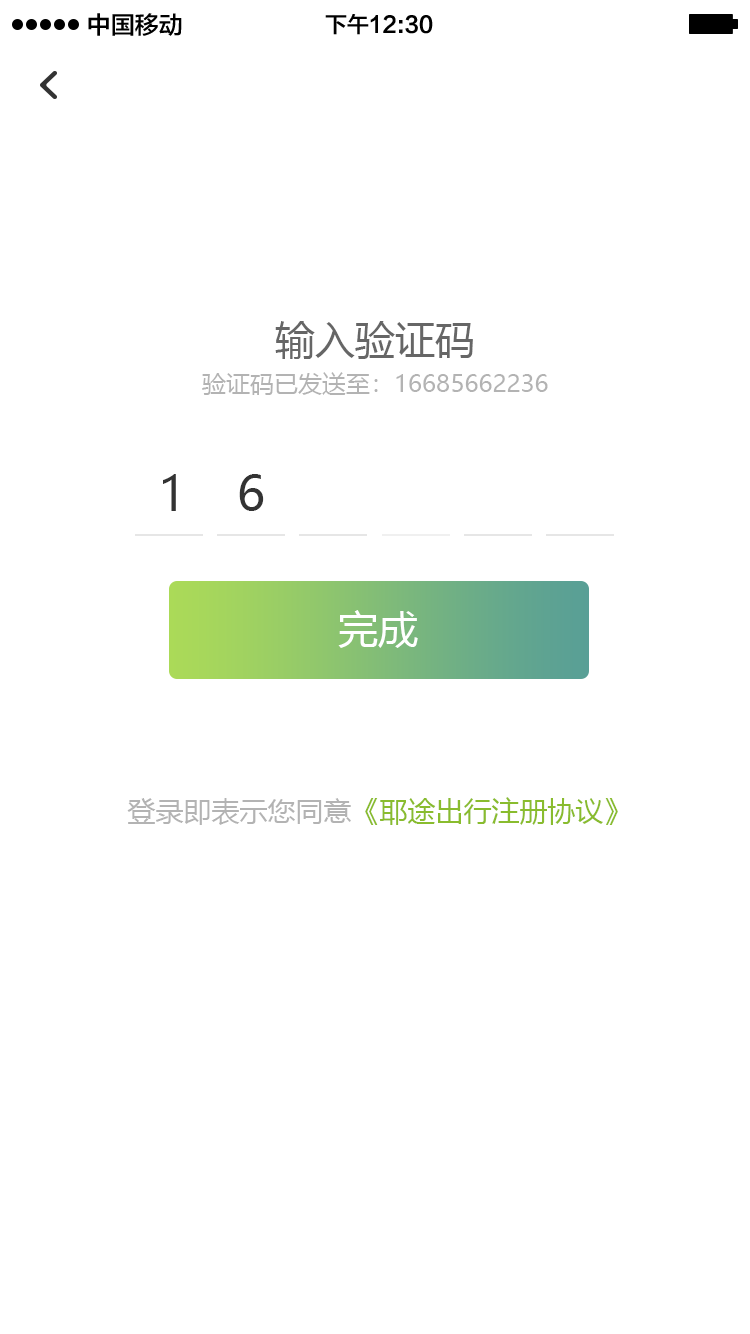
<style>
.page{position:relative;width:750px;height:1334px;background:#ffffff}
.page>*{position:absolute;margin:0}
.t1{font:24px "FZLTZHK--GBK1-0";color:#000000}
.t2{font:22px "FZLTZHK--GBK1-0";color:#000000}
.t3{font:40px "MicrosoftYaHei";color:#666666}
.t4{font:24px "MicrosoftYaHei";color:#b3b3b3}
.t5{font:48px "MicrosoftYaHei";color:#333333}
.t6{font:40px "MicrosoftYaHei";color:#ffffff}
.t7{font:28px "MicrosoftYaHei";color:#89bc2e}
.t8{font:28px "MicrosoftYaHei";color:#b3b3b3}
</style>
<div class="page">
<p class="t1" style="left:88px;top:13px;width:94px;height:23px">中国移动</p>
<p class="t2" style="left:325px;top:14px;width:108px;height:21px">下午12:30</p>
<p class="t3" style="left:275px;top:321px;width:198px;height:38px">输入验证码</p>
<p class="t4" style="left:202px;top:372px;width:346px;height:23px">验证码已发送至：16685662236</p>
<p class="t5" style="left:163px;top:474px;width:13px;height:37px">1</p>
<p class="t5" style="left:239px;top:474px;width:25px;height:37px">6</p>
<p class="t6" style="left:338px;top:610px;width:80px;height:38px">完成</p>
<p class="t7" style="left:127px;top:797px;width:491px;height:28px"><span class="t8">登录即表示您同意</span>《耶途出行注册协议》</p>
</div>
